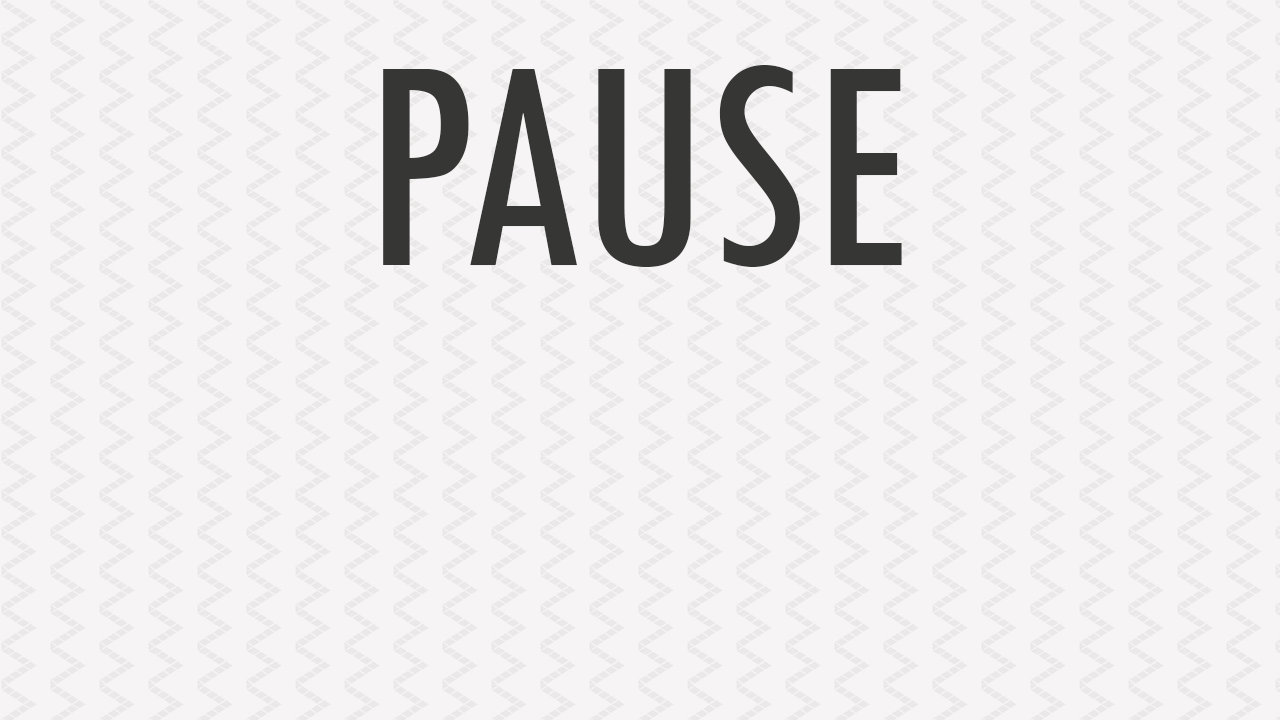
<style>
.page{position:relative;width:1280px;height:720px;background:#f6f4f4}
.page>*{position:absolute;margin:0}
.t1{font:315px "TwCenMT-Condensed";color:#363635}
</style>
<div class="page">
<p class="t1" style="left:383px;top:65px;width:519px;height:202px">PAUSE</p>
</div>
